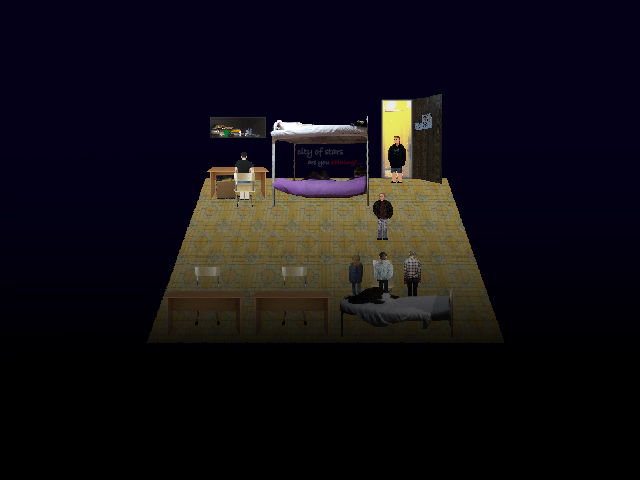
<style>
.page{position:relative;width:640px;height:480px;background:#030017}
.page>*{position:absolute;margin:0}
.t1{font:9px/10px "BradleyHandITC";color:#3e3d46}
.t2{font:7px/10px "BradleyHandITC";color:#3e3d46}
</style>
<div class="page">
<p class="t1" style="left:297px;top:147px;width:66px;height:20px">city of stars<br>     <span class="t2">are you </span><span class="t2">shining?...</span></p>
</div>
